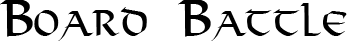
<style>
.page{position:relative;width:347px;height:41px;background:#ffffff}
.page>*{position:absolute;margin:0}
.t1{font:48px "Viking-Medium";color:#000000;font-variant:small-caps;scale:0.9 1}
</style>
<div class="page">
<p class="t1" style="left:0px;top:0px;width:347px;height:41px">Board Battle</p>
</div>
